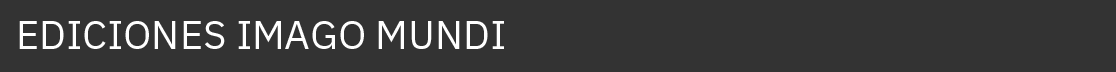
<style>
.page{position:relative;width:1116px;height:72px;background:#333333}
.page>*{position:absolute;margin:0}
.t1{font:40px "IBMPlexSans";color:#ffffff}
</style>
<div class="page">
<p class="t1" style="left:19px;top:21px;width:485px;height:28px">EDICIONES IMAGO MUNDI</p>
</div>
